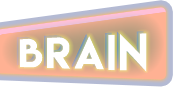
<style>
.page{position:relative;width:173px;height:87px;background:#ffffff}
.page>*{position:absolute;margin:0}
.t1{font:41.3px "LemonMilk";letter-spacing:0.05em;color:#ffffff}
</style>
<div class="page">
<p class="t1" style="left:19px;top:33px;width:128px;height:39px">Brain</p>
<p class="t1" style="left:19px;top:33px;width:128px;height:39px">Brain</p>
</div>
